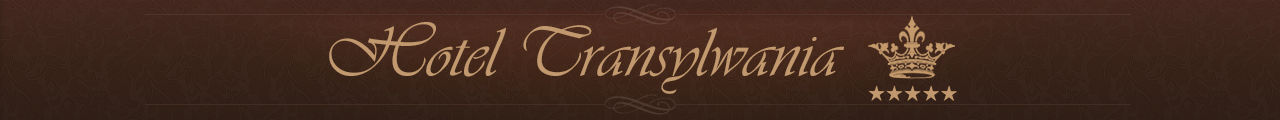
<style>
.page{position:relative;width:1280px;height:120px}
.page>*{position:absolute;margin:0}
.t1{font:72px "Vivaldii";color:#c2996e}
</style>
<div class="page">
<p class="t1" style="left:329px;top:22px;width:515px;height:72px">Hotel Transylwania</p>
</div>
